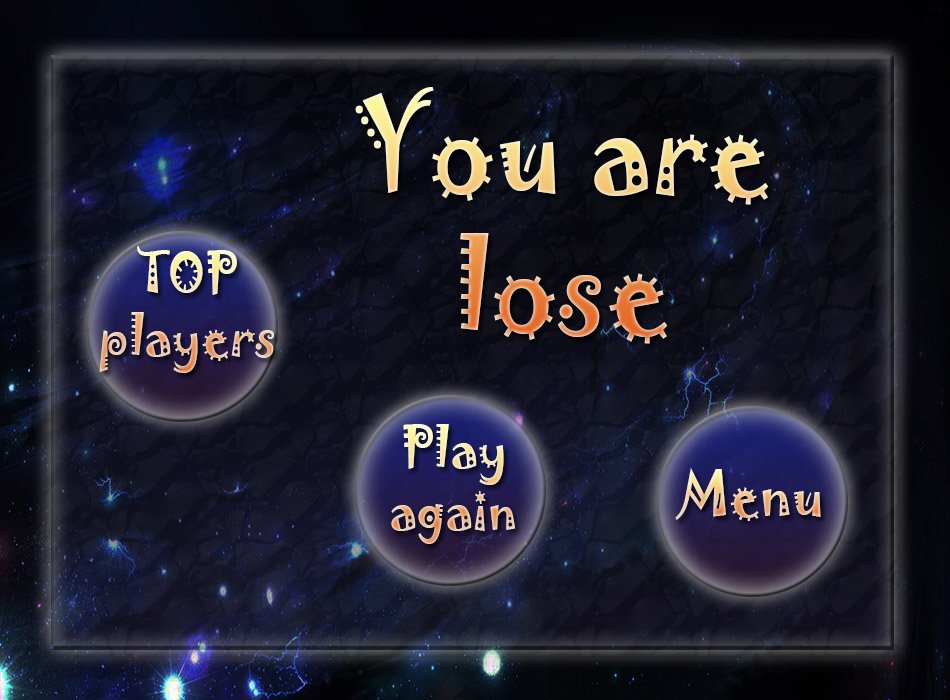
<style>
.page{position:relative;width:950px;height:700px}
.page>*{position:absolute;margin:0}
.t1{font:116px "Jokerman-Regular";scale:0.93 1}
.t2{font:52px "Jokerman-Regular";scale:0.93 1}
.t3{font:56px "Jokerman-Regular";scale:0.93 1}
</style>
<div class="page">
<p class="t1" style="left:355px;top:87px;width:414px;height:257px;text-align:center">You are lose</p>
<p class="t2" style="left:99px;top:246px;width:175px;height:127px;text-align:center">TOP players</p>
<p class="t2" style="left:391px;top:424px;width:125px;height:120px;text-align:center">Play again</p>
<p class="t3" style="left:675px;top:468px;width:146px;height:53px">Menu</p>
</div>
